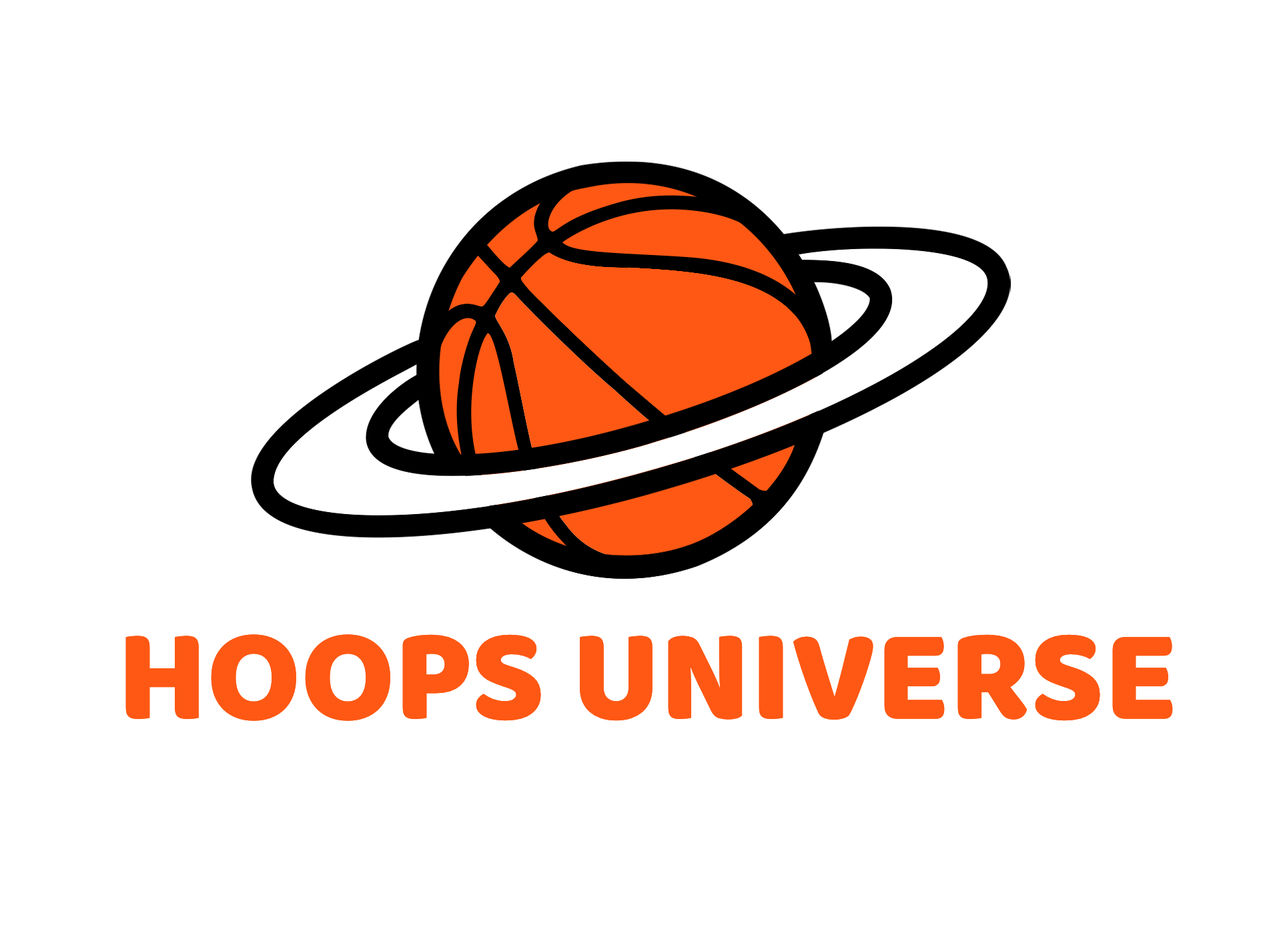
<style>
.page{position:relative;width:1261px;height:946px;background:#ffffff}
.page>*{position:absolute;margin:0}
.t1{font:133.5px "BalooThambi-Regular";color:#fe5814}
</style>
<div class="page">
<p class="t1" style="left:125px;top:634px;width:1048px;height:87px">HOOPS UNIVERSE</p>
</div>
